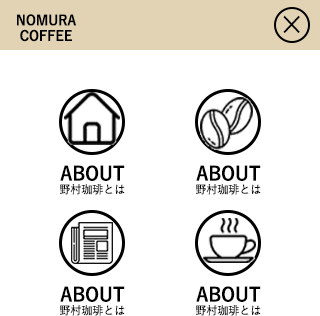
<style>
.page{position:relative;width:320px;height:316px;background:#ffffff}
.page>*{position:absolute;margin:0}
.t1{font:13.8px/29.2px "YuGo-Bold";color:#000000;scale:0.94 1}
.t2{font:13.8px "YuGo-Bold";color:#000000;scale:0.94 1}
.t3{font:26.5px "KozGoPr6N-Regular";color:#000000;scale:0.94 1}
.t4{font:11.6px "YuGo-Medium";color:#000000;scale:0.94 1}
.t5{font:19.1px "YuGo-Bold";color:#000000;scale:0.94 1}
</style>
<div class="page">
<p class="t1" style="left:17px;top:14px;width:59px;height:28px;text-align:center">NOMURA<span class="t2"><br>COFFEE</span></p>
<p class="t3" style="left:283px;top:15px;width:17px;height:18px">×</p>
<p class="t4" style="left:60px;top:165px;width:65px;height:30px;text-align:center"><span class="t5">ABOUT<br></span>野村珈琲とは</p>
<p class="t4" style="left:196px;top:165px;width:65px;height:30px;text-align:center"><span class="t5">ABOUT<br></span>野村珈琲とは</p>
<p class="t4" style="left:60px;top:286px;width:65px;height:30px;text-align:center"><span class="t5">ABOUT<br></span>野村珈琲とは</p>
<p class="t4" style="left:196px;top:286px;width:65px;height:30px;text-align:center"><span class="t5">ABOUT<br></span>野村珈琲とは</p>
</div>
